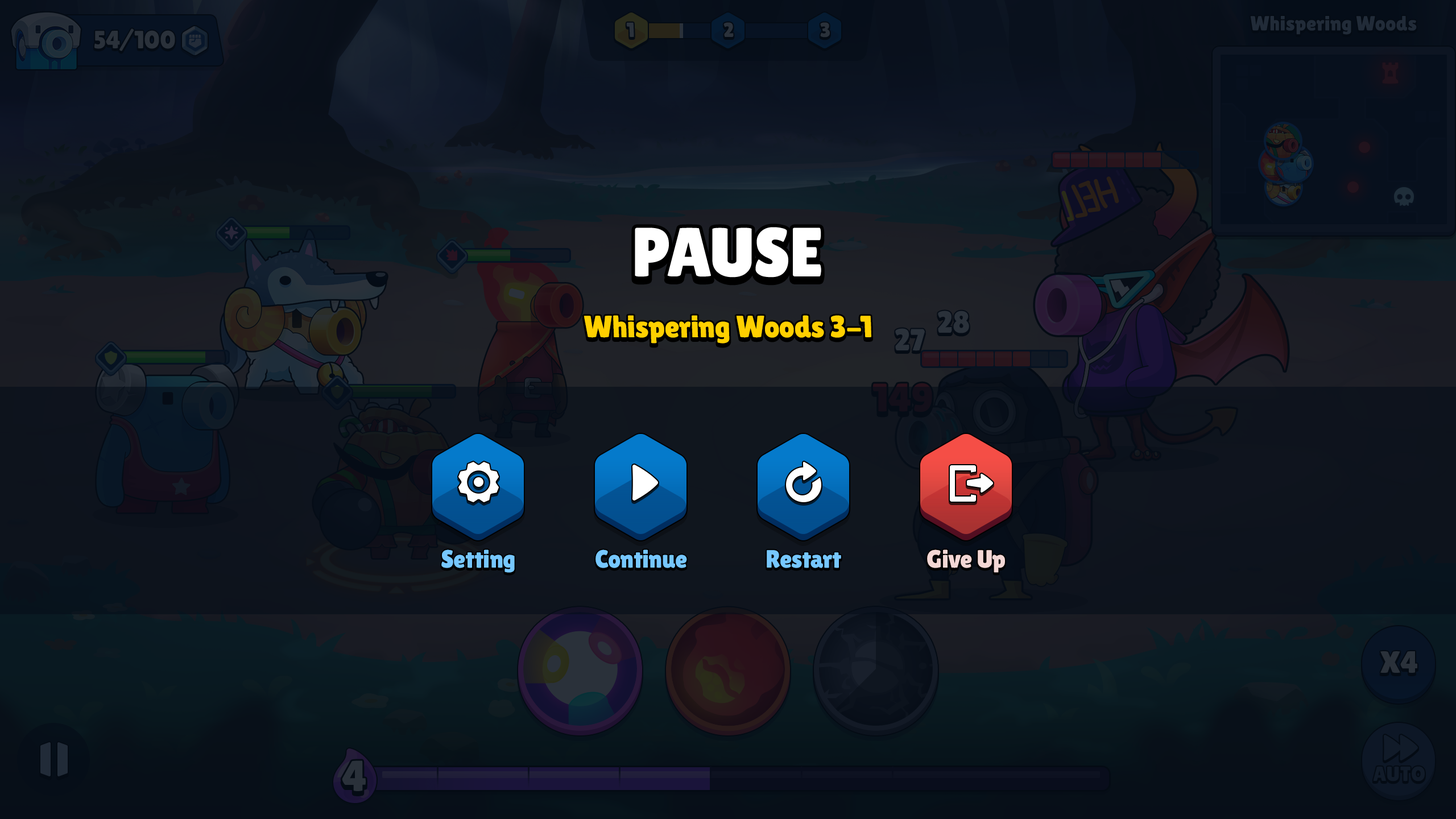
<style>
.page{position:relative;width:1456px;height:819px}
.page>*{position:absolute;margin:0}
.t1{font:69.4px "LilitaOne";color:#ffffff;text-transform:uppercase}
.t2{font:30.7px "LilitaOne";color:#ffd000}
.t3{font:25px "LilitaOne";color:#76c7ff}
.t4{font:25px "LilitaOne";color:#f3d7d5}
</style>
<div class="page">
<p class="t1" style="left:635px;top:227px;width:186px;height:51px">PAUSE</p>
<p class="t2" style="left:584px;top:315px;width:287px;height:29px">Whispering Woods 3-1</p>
<p class="t3" style="left:441px;top:549px;width:74px;height:24px">Setting</p>
<p class="t3" style="left:595px;top:549px;width:92px;height:19px">Continue</p>
<p class="t3" style="left:767px;top:550px;width:74px;height:18px">Restart</p>
<p class="t4" style="left:927px;top:549px;width:78px;height:24px">Give Up</p>
</div>
